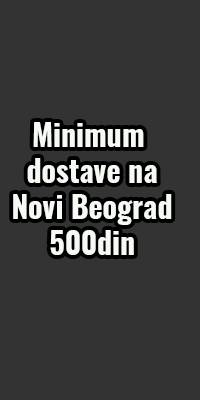
<style>
.page{position:relative;width:200px;height:400px;background:#333333}
.page>*{position:absolute;margin:0}
.t1{font:30px "Oswald-Bold";color:#f6faf4}
</style>
<div class="page">
<p class="t1" style="left:13px;top:122px;width:159px;height:133px;text-align:center">Minimum <br>dostave na<br>Novi Beograd<br>500din</p>
</div>
